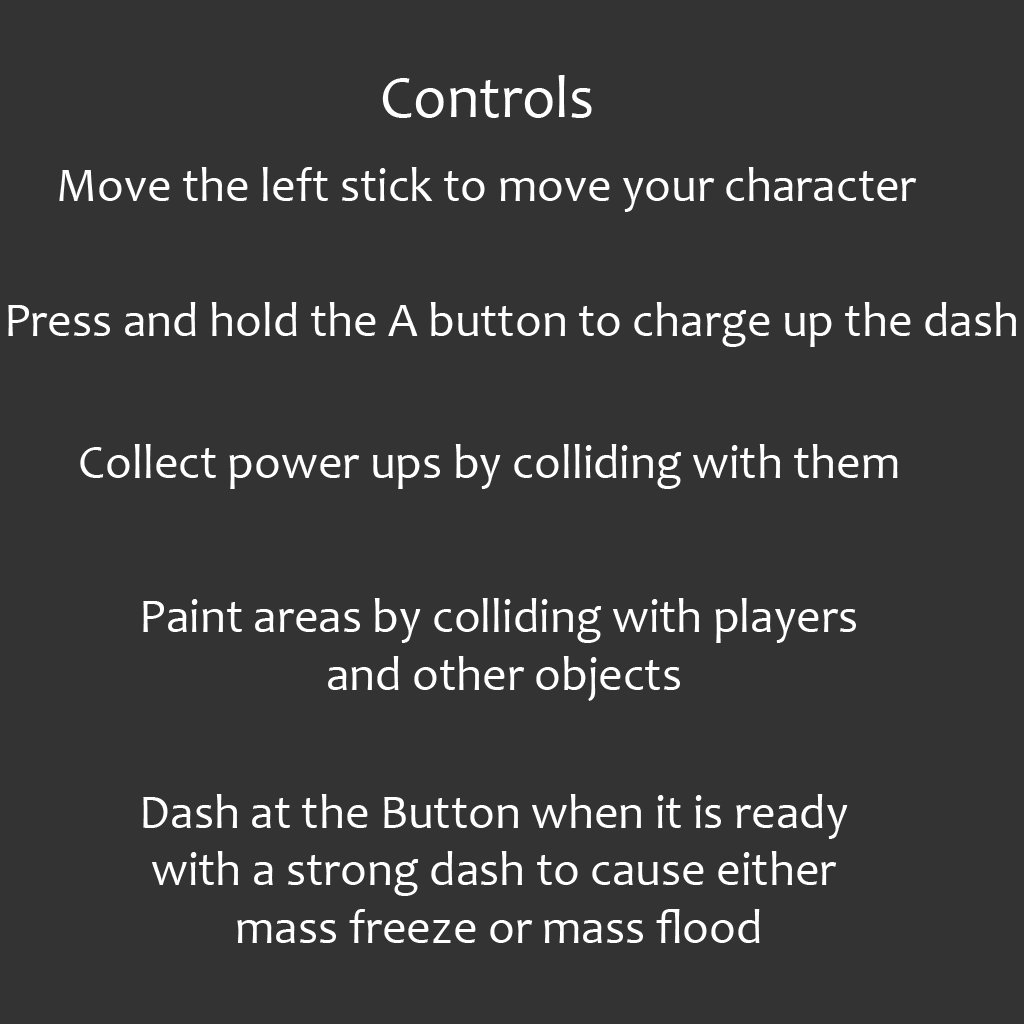
<style>
.page{position:relative;width:1024px;height:1024px;background:#333333}
.page>*{position:absolute;margin:0}
.t1{font:60px "Candara";color:#ffffff}
.t2{font:48px "Candara";color:#ffffff}
</style>
<div class="page">
<p class="t1" style="left:382px;top:75px;width:210px;height:43px">Controls</p>
<p class="t2" style="left:59px;top:167px;width:858px;height:45px">Move the left stick to move your character</p>
<p class="t2" style="left:8px;top:302px;width:1008px;height:45px">Press and hold the A button to charge up the dash</p>
<p class="t2" style="left:80px;top:444px;width:818px;height:45px">Collect power ups by colliding with them</p>
<p class="t2" style="left:143px;top:598px;width:713px;height:103px;text-align:center">Paint areas by colliding with players <br>and other objects</p>
<p class="t2" style="left:143px;top:794px;width:705px;height:149px;text-align:center">Dash at the Button when it is ready <br>with a strong dash to cause either <br>mass freeze or mass flood</p>
</div>
